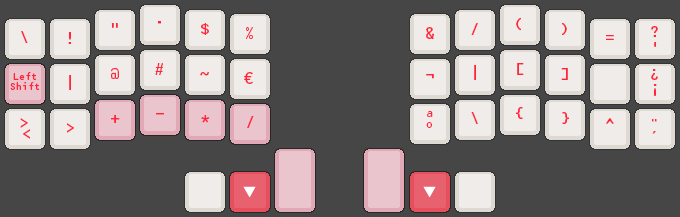
<style>
.page{position:relative;width:680px;height:217px;background:#464646}
.page>*{position:absolute;margin:0}
.t1{font:16px "OCRBStd";color:#ff253b}
.t2{font:10px/10px "OCRBStd";letter-spacing:-0.1em;color:#ff253b}
.t3{font:16px "OCRBStd";letter-spacing:-0.1em;color:#ff253b}
</style>
<div class="page">
<p class="t1" style="left:111px;top:23px;width:7px;height:5px">“</p>
<p class="t1" style="left:158px;top:21px;width:3px;height:3px">·</p>
<p class="t1" style="left:201px;top:23px;width:8px;height:12px">$</p>
<p class="t1" style="left:246px;top:27px;width:7px;height:12px">%</p>
<p class="t1" style="left:426px;top:27px;width:8px;height:12px">&amp;</p>
<p class="t1" style="left:471px;top:23px;width:7px;height:12px">/</p>
<p class="t1" style="left:516px;top:18px;width:5px;height:12px">(</p>
<p class="t1" style="left:562px;top:23px;width:5px;height:12px">)</p>
<p class="t1" style="left:651px;top:26px;width:7px;height:11px">?</p>
<p class="t1" style="left:21px;top:31px;width:7px;height:12px">\</p>
<p class="t1" style="left:68px;top:32px;width:3px;height:12px">!</p>
<p class="t1" style="left:606px;top:35px;width:8px;height:5px">=</p>
<p class="t1" style="left:654px;top:42px;width:3px;height:5px">‘</p>
<p class="t1" style="left:155px;top:63px;width:8px;height:12px">#</p>
<p class="t1" style="left:474px;top:65px;width:2px;height:15px">|</p>
<p class="t1" style="left:517px;top:63px;width:7px;height:12px">[</p>
<p class="t2" style="left:10px;top:72px;width:29px;height:18px;text-align:center">Left<br>Shift</p>
<p class="t1" style="left:69px;top:75px;width:2px;height:15px">|</p>
<p class="t1" style="left:111px;top:68px;width:8px;height:11px">@</p>
<p class="t1" style="left:200px;top:72px;width:9px;height:4px">~</p>
<p class="t1" style="left:244px;top:72px;width:9px;height:12px">€</p>
<p class="t1" style="left:426px;top:74px;width:8px;height:5px">¬</p>
<p class="t3" style="left:561px;top:68px;width:7px;height:12px">]</p>
<p class="t3" style="left:651px;top:69px;width:7px;height:11px">¿</p>
<p class="t3" style="left:653px;top:84px;width:4px;height:12px">¡</p>
<p class="t3" style="left:156px;top:113px;width:8px;height:2px">-</p>
<p class="t1" style="left:427px;top:111px;width:6px;height:6px">ª</p>
<p class="t1" style="left:471px;top:112px;width:7px;height:12px">\</p>
<p class="t1" style="left:516px;top:107px;width:7px;height:12px">{</p>
<p class="t1" style="left:562px;top:112px;width:7px;height:12px">}</p>
<p class="t3" style="left:20px;top:118px;width:8px;height:10px">&gt;</p>
<p class="t3" style="left:67px;top:123px;width:8px;height:10px">&gt;</p>
<p class="t3" style="left:111px;top:115px;width:9px;height:8px">+</p>
<p class="t3" style="left:201px;top:115px;width:9px;height:8px">*</p>
<p class="t3" style="left:247px;top:116px;width:7px;height:12px">/</p>
<p class="t1" style="left:426px;top:122px;width:6px;height:6px">º</p>
<p class="t1" style="left:606px;top:118px;width:8px;height:6px">^</p>
<p class="t1" style="left:652px;top:119px;width:5px;height:3px">¨</p>
<p class="t3" style="left:22px;top:129px;width:8px;height:10px">&lt;</p>
<p class="t1" style="left:652px;top:131px;width:4px;height:3px">´</p>
</div>
